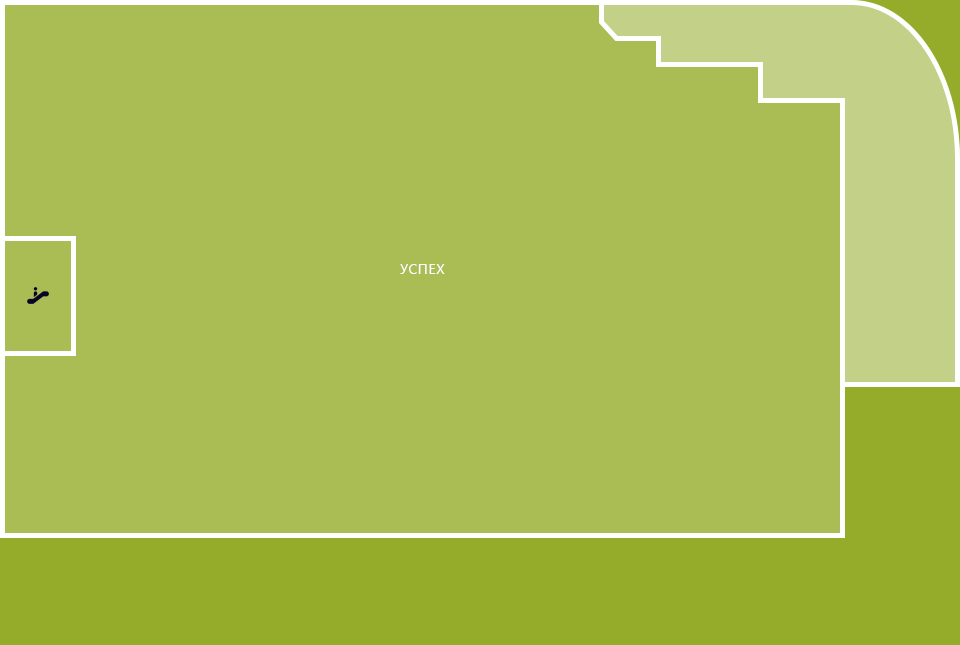
<style>
.page{position:relative;width:960px;height:645px;background:#a9bd54}
.page>*{position:absolute;margin:0}
.t1{font:14px "SegoeUI";letter-spacing:0.05em;color:#ffffff;text-transform:uppercase}
</style>
<div class="page">
<p class="t1" style="left:400px;top:264px;width:45px;height:10px">Успех</p>
</div>
